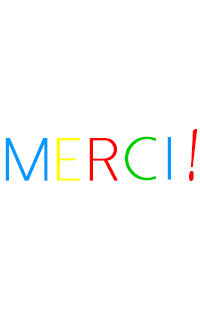
<style>
.page{position:relative;width:200px;height:320px;background:#ffffff}
.page>*{position:absolute;margin:0}
.t1{font:28.7px "DolceVitaLight";color:#00cc00;font-weight:bold}
.t2{font:28.7px "DolceVitaLight";color:#0099ff;font-weight:bold}
.t3{font:84.2px "MonotypeCorsiva";color:#ff0000;font-weight:bold;scale:0.45 1}
.t4{font:28.7px "DolceVitaLight";color:#ffff00;font-weight:bold}
.t5{font:28.7px "DolceVitaLight";color:#ff0000;font-weight:bold}
</style>
<div class="page">
<p class="t1" style="left:125px;top:136px;width:31px;height:45px">c</p>
<p class="t2" style="left:167px;top:137px;width:4px;height:43px">i</p>
<p class="t3" style="left:189px;top:129px;width:9px;height:52px">!</p>
<p class="t2" style="left:5px;top:138px;width:43px;height:43px">M</p>
<p class="t4" style="left:56px;top:138px;width:24px;height:43px">e</p>
<p class="t5" style="left:89px;top:138px;width:29px;height:43px">r</p>
</div>
